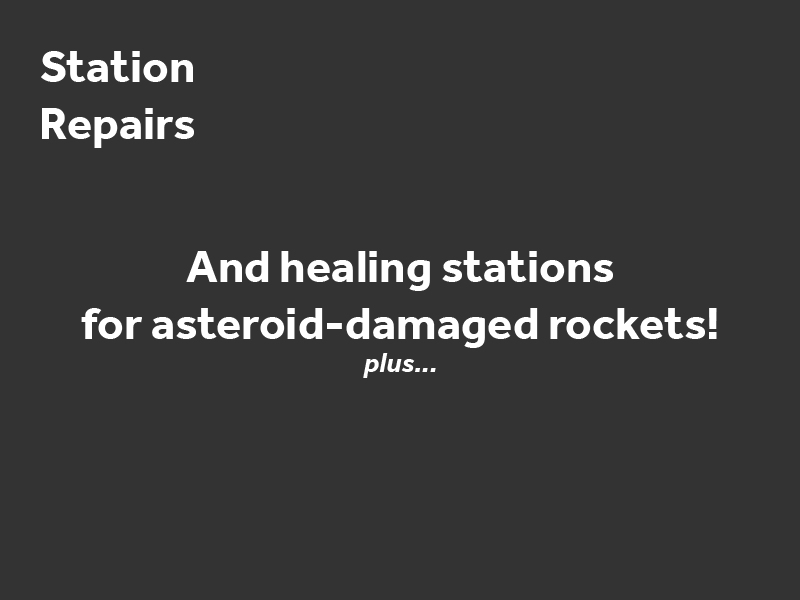
<style>
.page{position:relative;width:800px;height:600px;background:#333333}
.page>*{position:absolute;margin:0}
.t1{font:47.1px "Effra-Bold";color:#ffffff}
.t2{font:28.1px "Effra-BoldItalic";color:#ffffff}
</style>
<div class="page">
<p class="t1" style="left:41px;top:51px;width:153px;height:97px;text-align:center">Station<br>Repairs</p>
<p class="t1" style="left:81px;top:251px;width:636px;height:97px;text-align:center">And healing stations<br>for asteroid-damaged rockets!</p>
<p class="t2" style="left:363px;top:353px;width:73px;height:25px">plus...</p>
</div>
